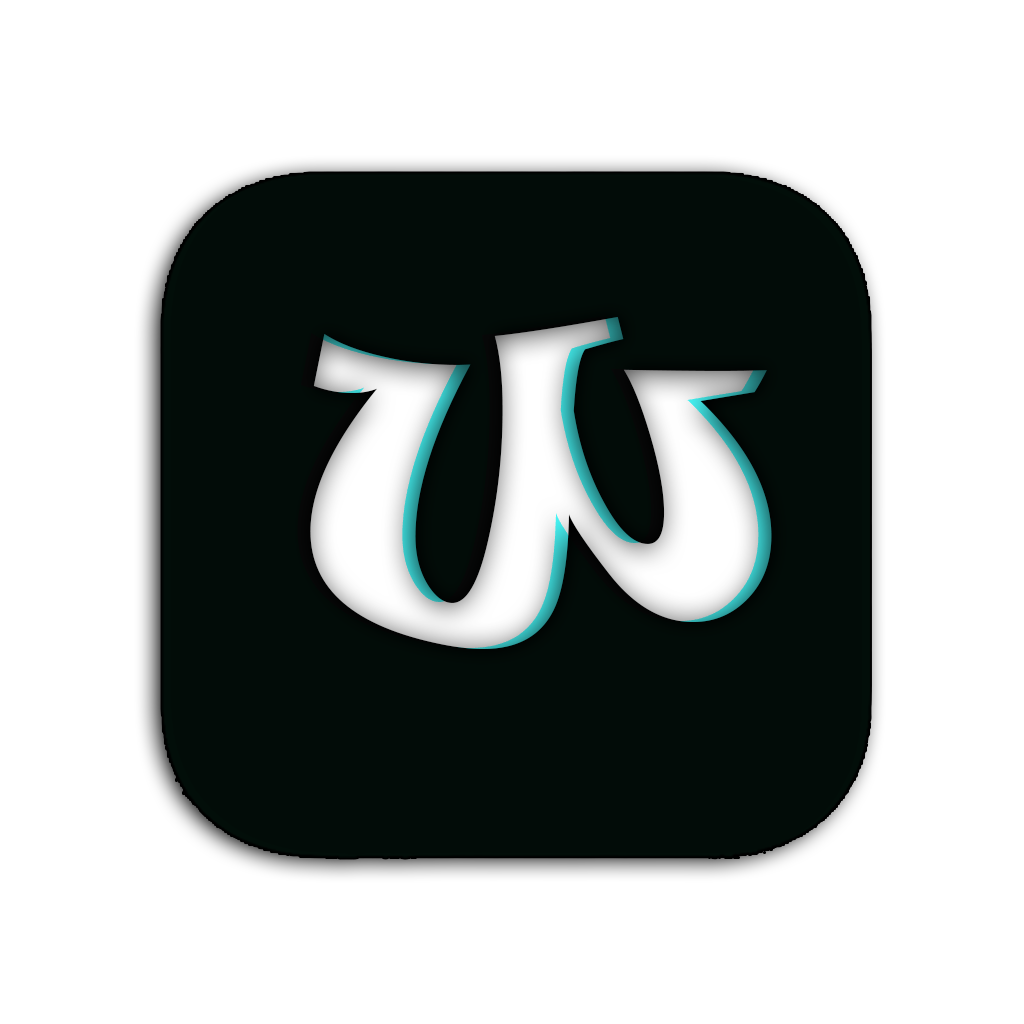
<style>
.page{position:relative;width:1024px;height:1024px;background:#ffffff}
.page>*{position:absolute;margin:0}
.t1{font:390.7px "Ravie"}
</style>
<div class="page">
<p class="t1" style="left:297px;top:315px;width:462px;height:333px">W</p>
<p class="t1" style="left:310px;top:316px;width:462px;height:333px">W</p>
</div>
